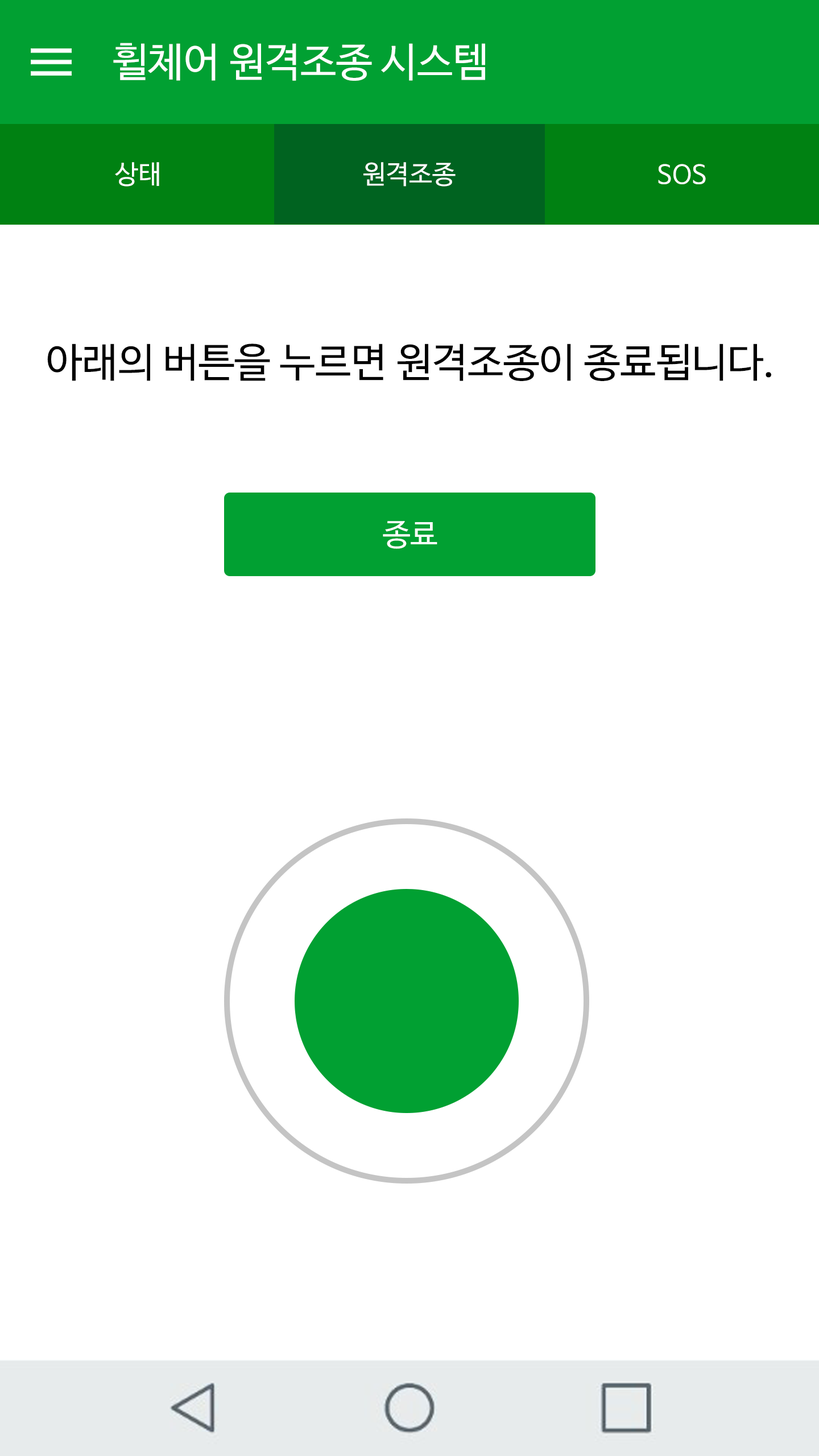
<style>
.page{position:relative;width:819px;height:1456px;background:#ffffff}
.page>*{position:absolute;margin:0}
.t1{font:40.3px "NanumBarunGothicOTF";color:#ffffff}
.t2{font:26.1px "NanumBarunGothicOTF";color:#ffffff}
.t3{font:40.3px "NanumBarunGothicOTF";color:#000000}
.t4{font:30.8px "NanumBarunGothicOTF";color:#ffffff}
</style>
<div class="page">
<p class="t1" style="left:113px;top:43px;width:372px;height:38px">휠체어 원격조종 시스템</p>
<p class="t2" style="left:115px;top:162px;width:44px;height:25px">상태</p>
<p class="t2" style="left:363px;top:162px;width:93px;height:25px">원격조종</p>
<p class="t2" style="left:658px;top:164px;width:48px;height:20px">SOS</p>
<p class="t3" style="left:47px;top:344px;width:724px;height:37px">아래의 버튼을 누르면 원격조종이 종료됩니다.</p>
<p class="t4" style="left:383px;top:521px;width:54px;height:28px">종료</p>
</div>
